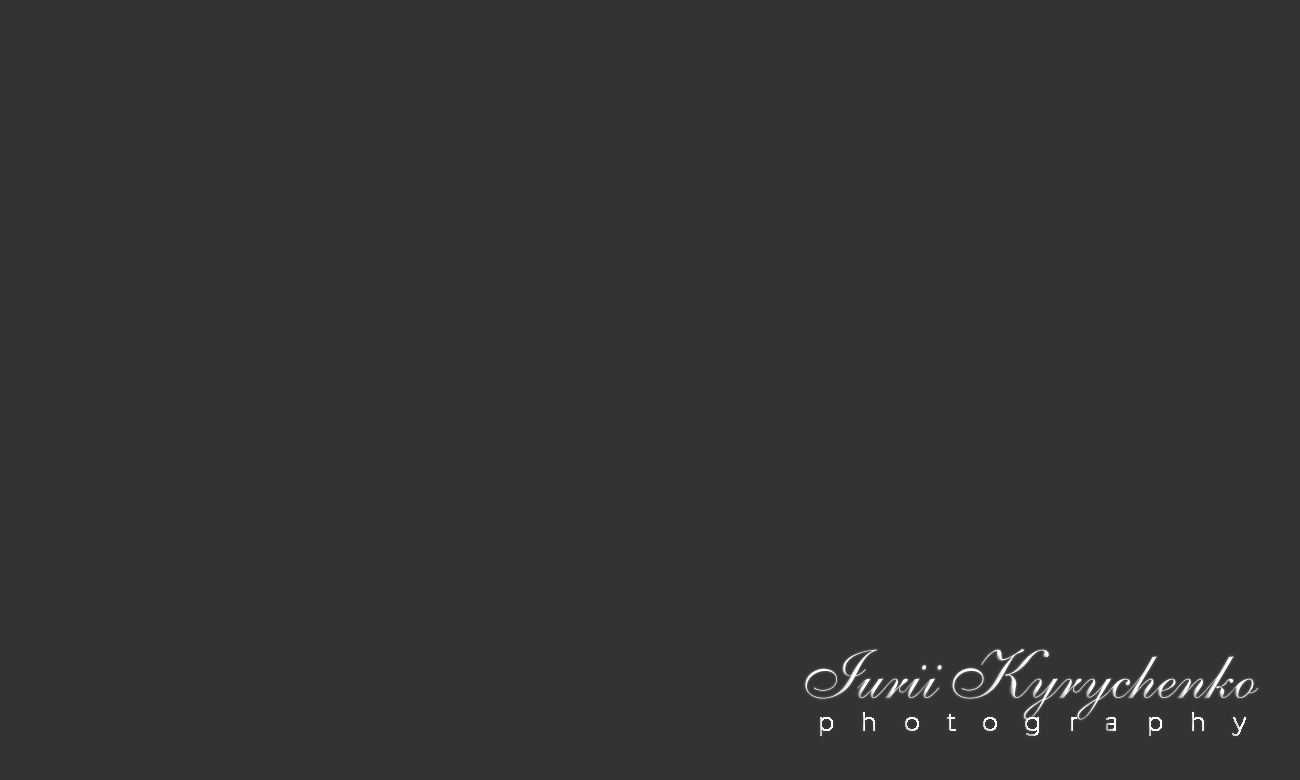
<style>
.page{position:relative;width:1300px;height:780px;background:#333333}
.page>*{position:absolute;margin:0}
.t1{font:68.9px "AnastasiaScript";color:#ffffff}
.t2{font:24.6px "Montserrat-Thin";letter-spacing:1.08em;color:#ffffff;font-weight:bold}
</style>
<div class="page">
<p class="t1" style="left:805px;top:649px;width:453px;height:71px">Iurii Kyrychenko</p>
<p class="t2" style="left:820px;top:712px;width:426px;height:24px">photography</p>
</div>
